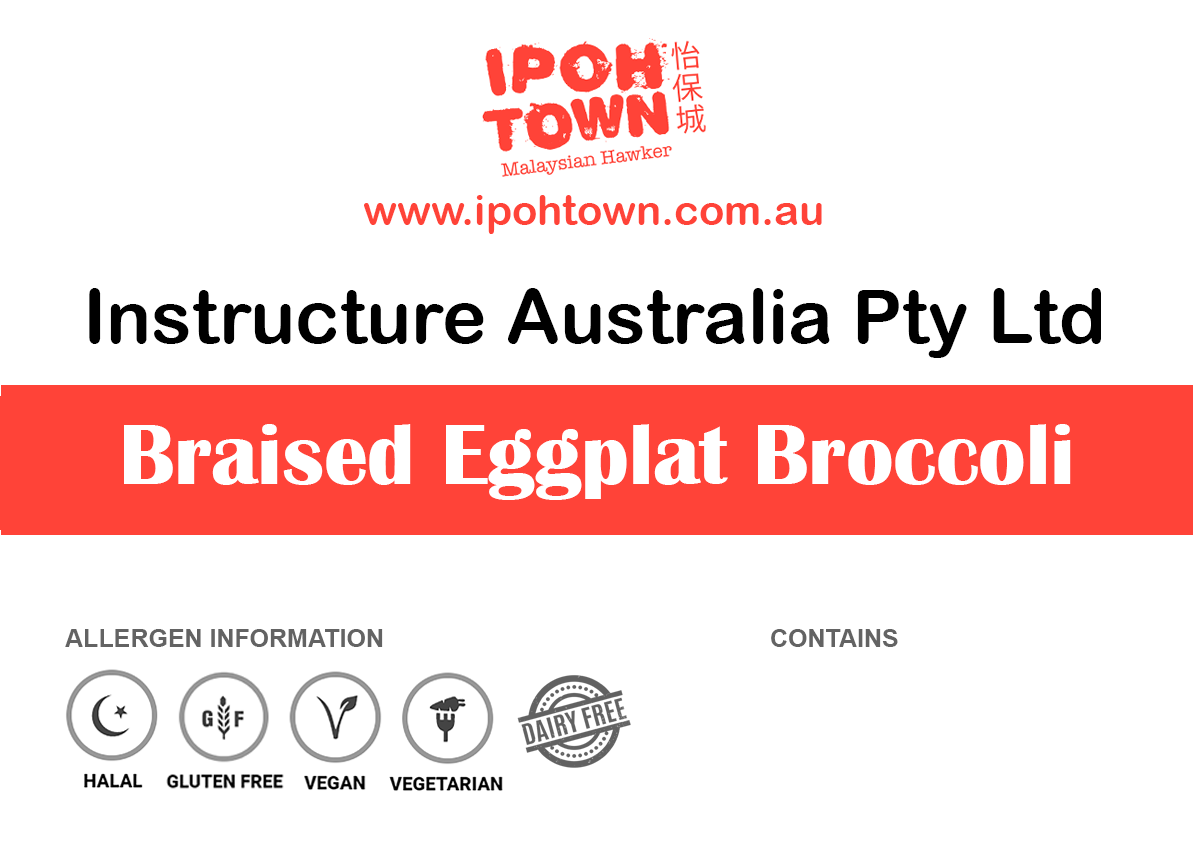
<style>
.page{position:relative;width:1193px;height:850px;background:#ffffff}
.page>*{position:absolute;margin:0}
.t1{font:41.7px "ArialRoundedMTBold";color:#ff4338}
.t2{font:75px "ArialRoundedMTBold";color:#000000}
.t3{font:87.5px "BritannicBold";color:#ffffff}
.t4{font:25px "Arial-BoldMT";color:#636363}
</style>
<div class="page">
<p class="t1" style="left:364px;top:195px;width:458px;height:39px">www.ipohtown.com.au</p>
<p class="t2" style="left:89px;top:288px;width:1012px;height:70px">Instructure Australia Pty Ltd</p>
<p class="t3" style="left:124px;top:424px;width:947px;height:76px">Braised Eggplat Broccoli</p>
<p class="t4" style="left:65px;top:629px;width:318px;height:18px">ALLERGEN INFORMATION</p>
<p class="t4" style="left:771px;top:629px;width:127px;height:18px">CONTAINS</p>
</div>
